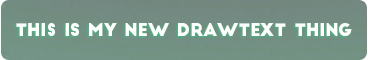
<style>
.page{position:relative;width:368px;height:60px}
.page>*{position:absolute;margin:0}
.t1{font:17px "BigJohn";color:#ffffff;text-transform:uppercase}
</style>
<div class="page">
<p class="t1" style="left:16px;top:23px;width:336px;height:13px">THIS IS MY NEW DRAWTEXT THING</p>
</div>
